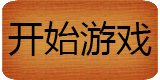
<style>
.page{position:relative;width:160px;height:80px}
.page>*{position:absolute;margin:0}
.t1{font:36px "MicrosoftYaHei";color:#000000}
</style>
<div class="page">
<p class="t1" style="left:8px;top:21px;width:144px;height:35px">开始游戏</p>
</div>
